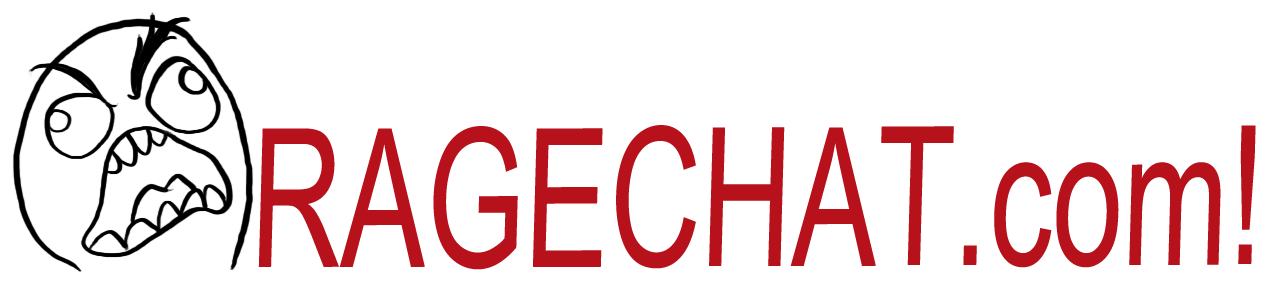
<style>
.page{position:relative;width:1268px;height:294px;background:#ffffff}
.page>*{position:absolute;margin:0}
.t1{font:193.4px "ArialMT";color:#b7111b;scale:0.65 1}
</style>
<div class="page">
<p class="t1" style="left:258px;top:125px;width:998px;height:145px">RAGECHAT.com!</p>
</div>
